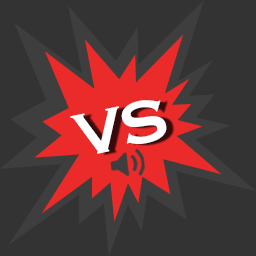
<style>
.page{position:relative;width:256px;height:256px;background:#333333}
.page>*{position:absolute;margin:0}
.t1{font:80px "Copperplate";letter-spacing:-0.1em;color:#ffffff}
</style>
<div class="page">
<p class="t1" style="left:70px;top:100px;width:97px;height:54px;rotate:-12deg">VS</p>
</div>
